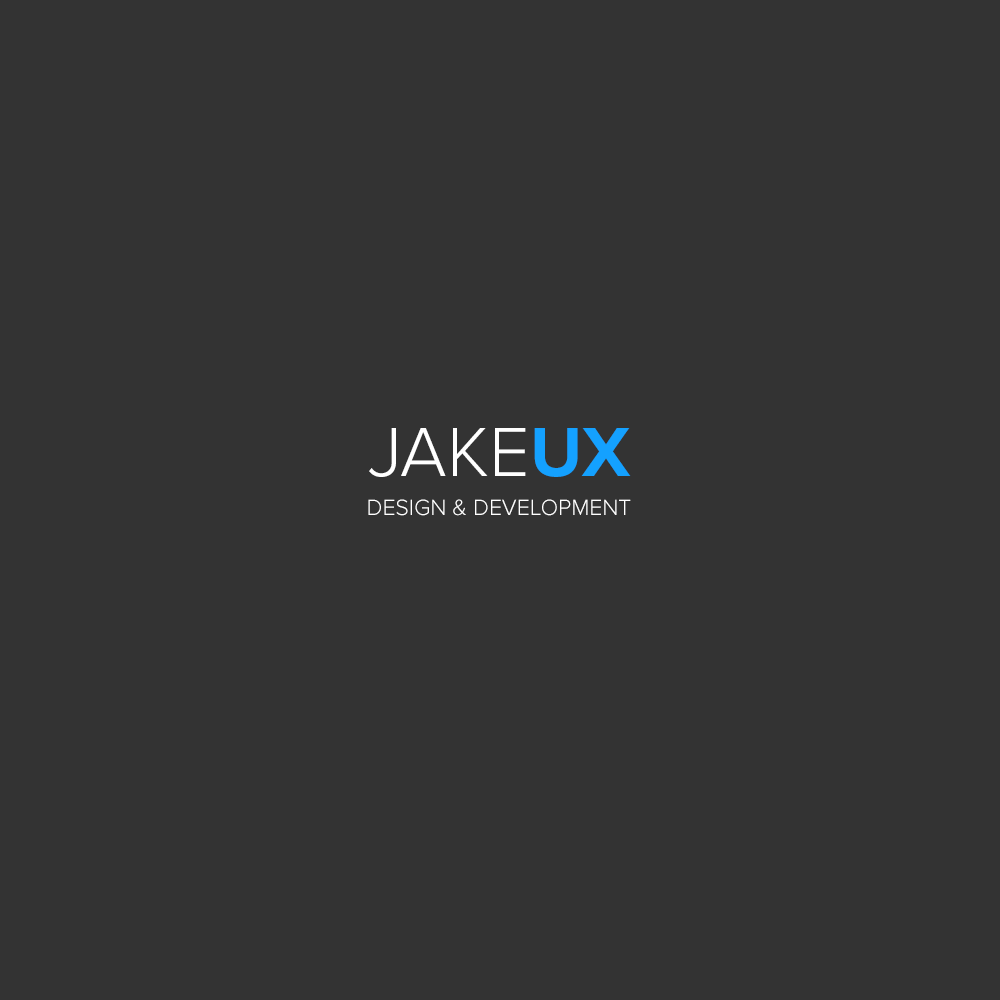
<style>
.page{position:relative;width:1000px;height:1000px;background:#333333}
.page>*{position:absolute;margin:0}
.t1{font:72px "ProximaNova-Light";color:#ffffff;text-transform:uppercase}
.t2{font:72px "ProximaNova-Bold";color:#14a1ff;text-transform:uppercase}
.t3{font:23px "ProximaNova-Light";color:#ffffff;text-transform:uppercase}
</style>
<div class="page">
<p class="t1" style="left:369px;top:428px;width:262px;height:49px">Jake<span class="t2">UX</span></p>
<p class="t3" style="left:368px;top:499px;width:263px;height:17px">Design &amp; Development</p>
</div>
